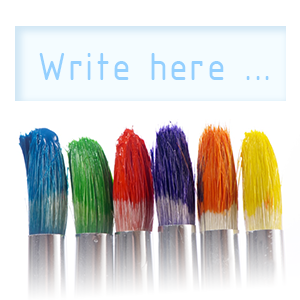
<style>
.page{position:relative;width:300px;height:300px;background:#ffffff}
.page>*{position:absolute;margin:0}
.t1{font:42.1px "ISOCPEUR";letter-spacing:0.026em;color:#94d0ff}
</style>
<div class="page">
<p class="t1" style="left:39px;top:53px;width:230px;height:27px">Write here ...</p>
</div>
